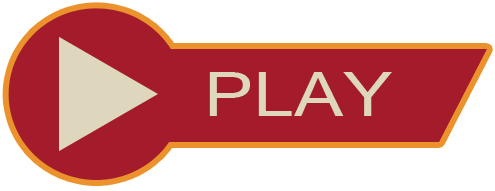
<style>
.page{position:relative;width:495px;height:191px;background:#a41c2b}
.page>*{position:absolute;margin:0}
.t1{font:66.8px "Shruti";color:#ded7bd;scale:1.19 1}
</style>
<div class="page">
<p class="t1" style="left:209px;top:72px;width:183px;height:44px">PLAY</p>
</div>
